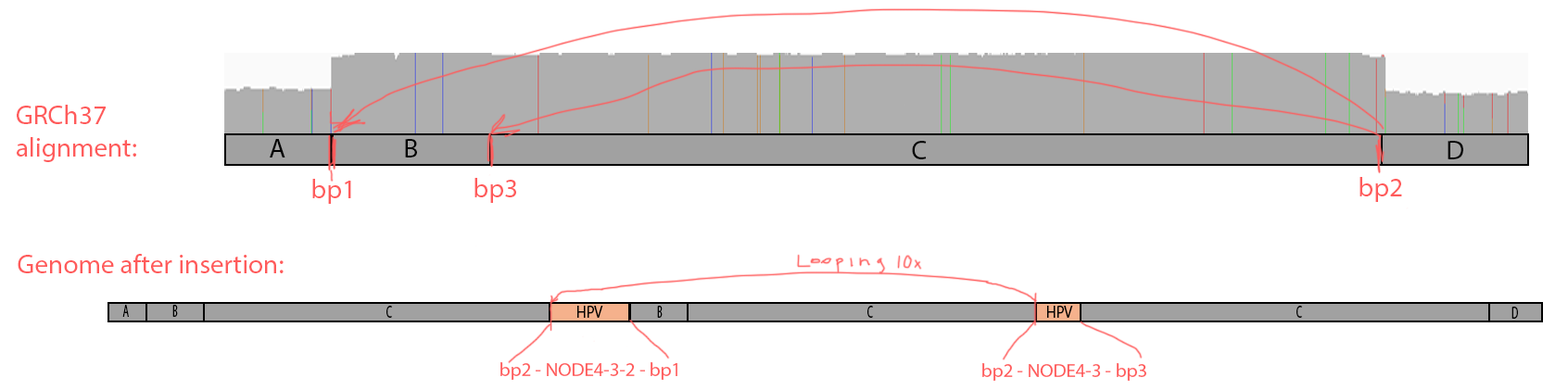
<style>
.page{position:relative;width:1568px;height:390px;background:#ffffff}
.page>*{position:absolute;margin:0}
.t1{font:27px "MyriadPro-Regular";color:#ff5b5b}
.t2{font:27px "MyriadPro-Regular";color:#000000}
.t3{font:17px "MyriadPro-Regular";color:#000000;scale:0.59 1}
.t4{font:17px "MyriadPro-Regular";color:#000000;scale:0.89 1}
.t5{font:19.3px "MyriadPro-Regular";color:#ff5b5b}
</style>
<div class="page">
<p class="t1" style="left:17px;top:105px;width:119px;height:57px">GRCh37 <br>alignment:</p>
<p class="t2" style="left:270px;top:139px;width:15px;height:19px">A</p>
<p class="t2" style="left:405px;top:139px;width:12px;height:19px">B</p>
<p class="t2" style="left:912px;top:141px;width:15px;height:18px">C</p>
<p class="t2" style="left:1448px;top:141px;width:15px;height:18px">D</p>
<p class="t1" style="left:312px;top:179px;width:39px;height:25px">bp1</p>
<p class="t1" style="left:474px;top:178px;width:42px;height:25px">bp3</p>
<p class="t1" style="left:1359px;top:177px;width:43px;height:25px">bp2</p>
<p class="t1" style="left:18px;top:254px;width:266px;height:19px">Genome after insertion:</p>
<p class="t3" style="left:122px;top:305px;width:7px;height:12px">A</p>
<p class="t3" style="left:172px;top:305px;width:6px;height:12px">B</p>
<p class="t3" style="left:386px;top:306px;width:6px;height:12px">C</p>
<p class="t4" style="left:577px;top:306px;width:26px;height:12px">HPV</p>
<p class="t3" style="left:657px;top:306px;width:6px;height:12px">B</p>
<p class="t3" style="left:867px;top:306px;width:6px;height:12px">C</p>
<p class="t4" style="left:1047px;top:306px;width:26px;height:12px">HPV</p>
<p class="t3" style="left:1296px;top:306px;width:6px;height:12px">C</p>
<p class="t3" style="left:1511px;top:307px;width:7px;height:12px">D</p>
<p class="t5" style="left:500px;top:362px;width:177px;height:18px">bp2 - NODE4-3-2 - bp1</p>
<p class="t5" style="left:982px;top:363px;width:164px;height:18px">bp2 - NODE4-3 - bp3</p>
</div>
